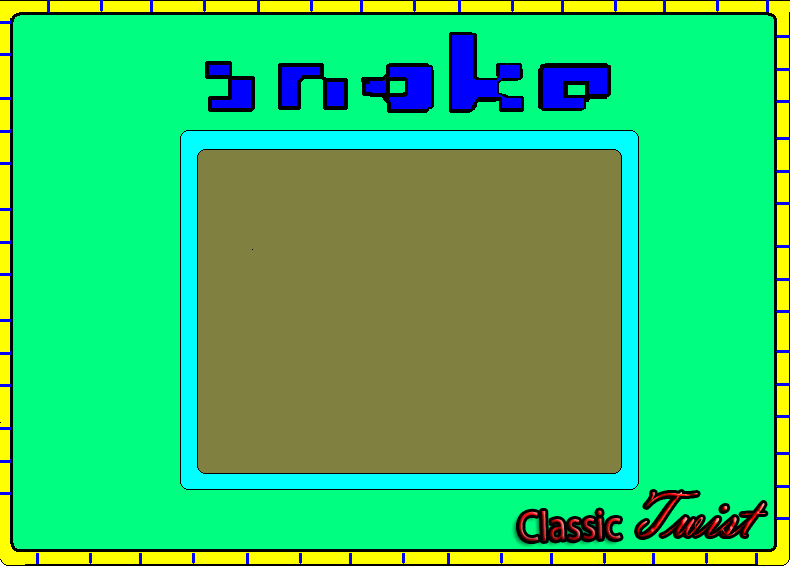
<style>
.page{position:relative;width:790px;height:566px;background:#00ff80}
.page>*{position:absolute;margin:0}
.t1{font:66.1px "VladimirScript";scale:0.96 1}
.t2{font:42px "MyriadPro-Regular";scale:0.89 1}
</style>
<div class="page">
<p class="t1" style="left:637px;top:492px;width:129px;height:45px">Twist</p>
<p class="t2" style="left:519px;top:510px;width:102px;height:31px;rotate:-2deg">Classic</p>
</div>
